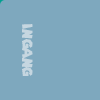
<style>
.page{position:relative;width:100px;height:100px;background:#7ea8be}
.page>*{position:absolute;margin:0}
.t1{font:13.9px "SuperMarioGalaxy";color:#c5d6e0}
</style>
<div class="page">
<p class="t1" style="left:22px;top:24px;width:11px;height:52px;rotate:90deg">ingang</p>
</div>
